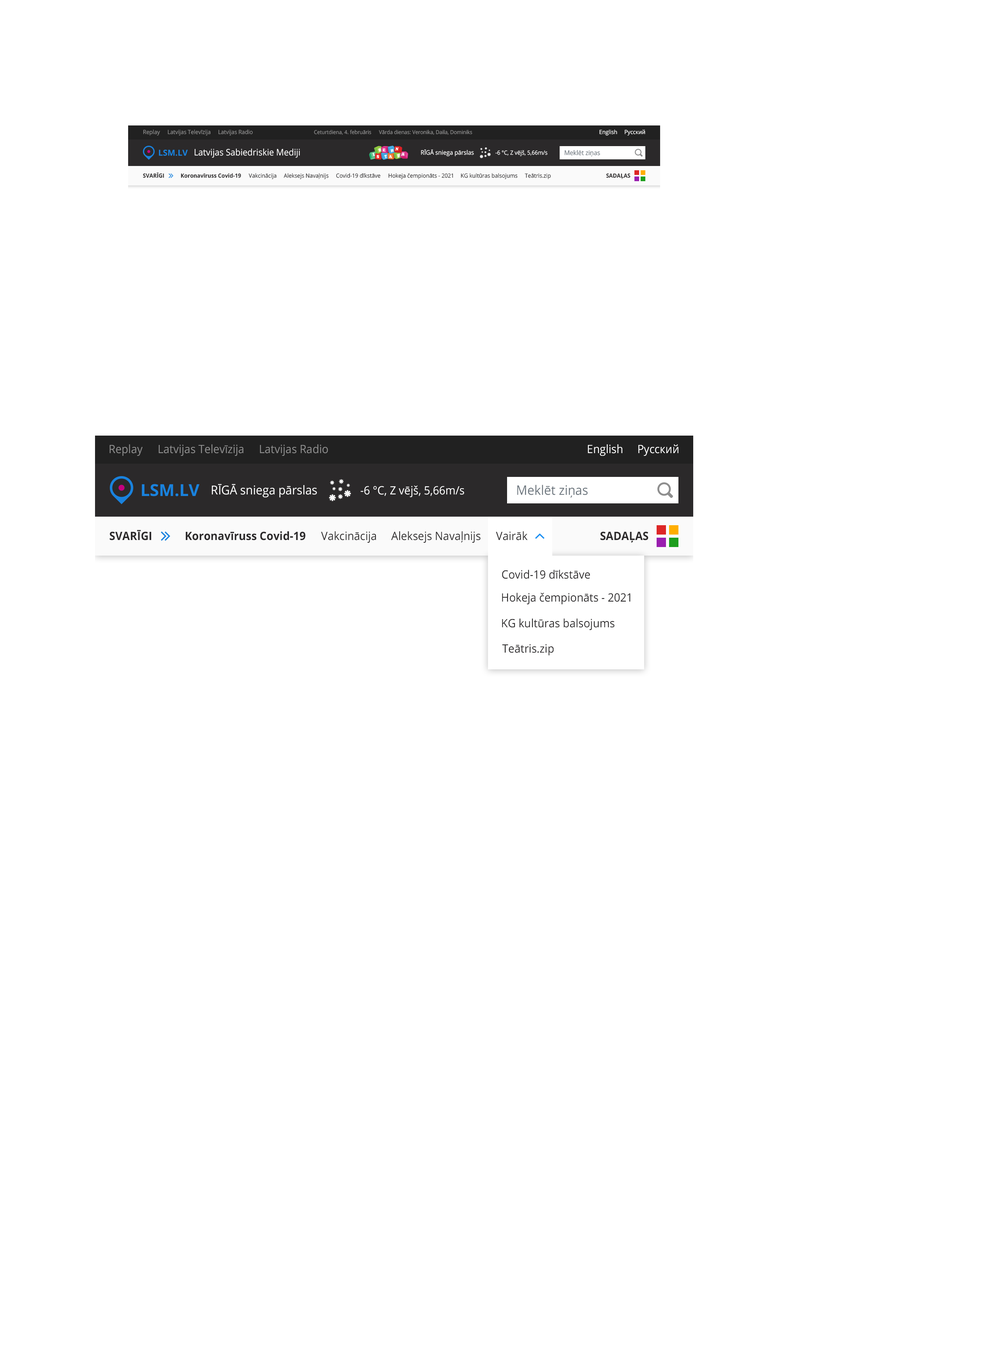
<style>
.page{position:relative;width:997px;height:1359px;background:#ffffff}
.page>*{position:absolute;margin:0}
.t1{font:5.7px "OpenSans";color:#8e8e8e;scale:0.95 1}
.t2{font:5.3px "OpenSans";color:#8e8e8e;scale:0.95 1}
.t3{font:5.7px "OpenSans";color:#ffffff;scale:0.95 1}
.t4{font:9px "OpenSans";color:#ffffff;scale:0.95 1}
.t5{font:6.1px "OpenSans";color:#ffffff;scale:0.95 1}
.t6{font:6.5px "OpenSans";color:#6c757d;scale:0.95 1}
.t7{font:5.7px "OpenSans-Bold";color:#2b292a;text-transform:uppercase;scale:0.95 1}
.t8{font:5.7px "OpenSans-Bold";color:#2b292a;scale:0.95 1}
.t9{font:5.7px "OpenSans";color:#2b292a;scale:0.95 1}
.t10{font:11.5px "OpenSans";color:#8e8e8e;scale:0.95 1}
.t11{font:11.5px "OpenSans";color:#ffffff;scale:0.95 1}
.t12{font:12.3px "OpenSans";color:#ffffff;scale:0.95 1}
.t13{font:13.1px "OpenSans";color:#6c757d;scale:0.95 1}
.t14{font:11.5px "OpenSans-Bold";color:#2b292a;text-transform:uppercase;scale:0.95 1}
.t15{font:11.5px "OpenSans-Bold";color:#2b292a;scale:0.95 1}
.t16{font:11.5px "OpenSans";color:#2b292a;scale:0.95 1}
</style>
<div class="page">
<p class="t1" style="left:143px;top:129px;width:17px;height:7px">Replay</p>
<p class="t1" style="left:168px;top:129px;width:43px;height:7px">Latvijas Televīzija</p>
<p class="t1" style="left:219px;top:129px;width:34px;height:7px">Latvijas Radio</p>
<p class="t2" style="left:314px;top:130px;width:57px;height:5px">Ceturtdiena, 4. februāris</p>
<p class="t2" style="left:379px;top:130px;width:94px;height:5px">Vārda dienas: Veronika, Daila, Dominiks</p>
<p class="t3" style="left:600px;top:129px;width:18px;height:7px">English</p>
<p class="t3" style="left:625px;top:129px;width:21px;height:7px">Русский</p>
<p class="t4" style="left:194px;top:148px;width:106px;height:10px">Latvijas Sabiedriskie Mediji</p>
<p class="t5" style="left:421px;top:149px;width:53px;height:7px">RĪGĀ sniega pārslas</p>
<p class="t3" style="left:496px;top:150px;width:52px;height:6px">-6 °C, Z vējš, 5,66m/s</p>
<p class="t6" style="left:565px;top:150px;width:35px;height:7px">Meklēt ziņas</p>
<p class="t7" style="left:143px;top:172px;width:21px;height:6px">Svarīgi</p>
<p class="t8" style="left:181px;top:173px;width:60px;height:5px">Koronavīruss Covid-19</p>
<p class="t9" style="left:249px;top:173px;width:28px;height:6px">Vakcinācija</p>
<p class="t9" style="left:284px;top:173px;width:45px;height:6px">Aleksejs Navaļnijs</p>
<p class="t9" style="left:336px;top:173px;width:45px;height:5px">Covid-19 dīkstāve</p>
<p class="t9" style="left:388px;top:173px;width:65px;height:6px">Hokeja čempionāts - 2021</p>
<p class="t9" style="left:461px;top:173px;width:57px;height:6px">KG kultūras balsojums</p>
<p class="t9" style="left:525px;top:173px;width:26px;height:6px">Teātris.zip</p>
<p class="t7" style="left:606px;top:173px;width:25px;height:6px">Sadaļas</p>
<p class="t10" style="left:109px;top:444px;width:34px;height:12px">Replay</p>
<p class="t10" style="left:159px;top:444px;width:85px;height:12px">Latvijas Televīzija</p>
<p class="t10" style="left:260px;top:444px;width:68px;height:12px">Latvijas Radio</p>
<p class="t11" style="left:588px;top:444px;width:35px;height:12px">English</p>
<p class="t11" style="left:639px;top:444px;width:40px;height:12px">Русский</p>
<p class="t12" style="left:212px;top:484px;width:105px;height:14px">RĪGĀ sniega pārslas</p>
<p class="t11" style="left:361px;top:485px;width:103px;height:12px">-6 °C, Z vējš, 5,66m/s</p>
<p class="t13" style="left:517px;top:485px;width:71px;height:13px">Meklēt ziņas</p>
<p class="t14" style="left:109px;top:530px;width:43px;height:10px">Svarīgi</p>
<p class="t15" style="left:186px;top:531px;width:119px;height:9px">Koronavīruss Covid-19</p>
<p class="t16" style="left:321px;top:531px;width:55px;height:12px">Vakcinācija</p>
<p class="t16" style="left:391px;top:531px;width:90px;height:12px">Aleksejs Navaļnijs</p>
<p class="t16" style="left:496px;top:531px;width:32px;height:9px">Vairāk</p>
<p class="t16" style="left:496px;top:531px;width:32px;height:9px">Vairāk</p>
<p class="t14" style="left:600px;top:531px;width:49px;height:12px">Sadaļas</p>
<p class="t16" style="left:502px;top:570px;width:88px;height:9px">Covid-19 dīkstāve</p>
<p class="t16" style="left:502px;top:593px;width:129px;height:11px">Hokeja čempionāts - 2021</p>
<p class="t16" style="left:502px;top:618px;width:113px;height:12px">KG kultūras balsojums</p>
<p class="t16" style="left:502px;top:644px;width:52px;height:11px">Teātris.zip</p>
</div>
